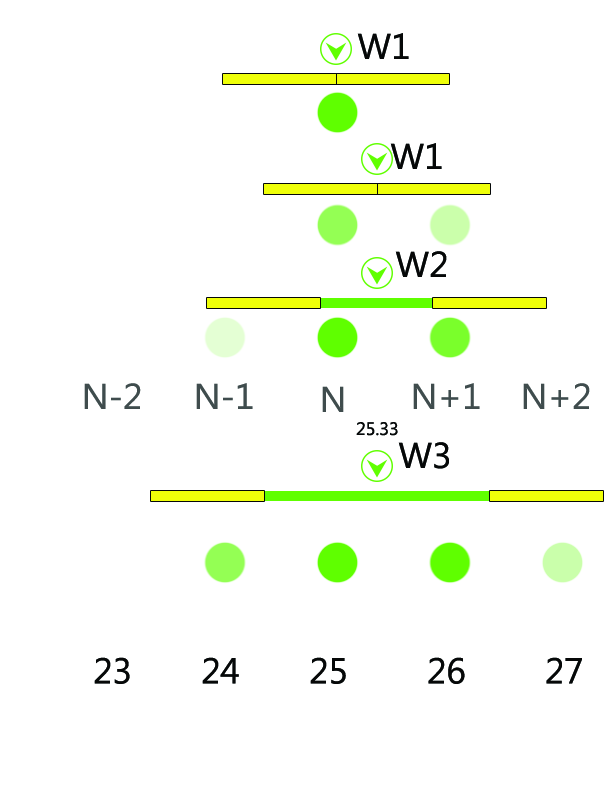
<style>
.page{position:relative;width:612px;height:792px;background:#ffffff}
.page>*{position:absolute;margin:0}
.t1{font:36px "MicrosoftNewTaiLue";color:#060808}
.t2{font:36px "MicrosoftNewTaiLue";color:#3f4c4d}
.t3{font:18px "MicrosoftNewTaiLue";color:#060808}
</style>
<div class="page">
<p class="t1" style="left:357px;top:33px;width:52px;height:26px">W1</p>
<p class="t1" style="left:390px;top:143px;width:52px;height:26px">W1</p>
<p class="t1" style="left:395px;top:251px;width:52px;height:26px">W2</p>
<p class="t2" style="left:84px;top:383px;width:57px;height:26px">N-2</p>
<p class="t2" style="left:196px;top:383px;width:57px;height:26px">N-1</p>
<p class="t2" style="left:322px;top:386px;width:22px;height:26px">N</p>
<p class="t2" style="left:413px;top:383px;width:67px;height:26px">N+1</p>
<p class="t2" style="left:523px;top:383px;width:67px;height:26px">N+2</p>
<p class="t3" style="left:356px;top:422px;width:42px;height:14px">25.33</p>
<p class="t1" style="left:398px;top:442px;width:51px;height:27px">W3</p>
<p class="t1" style="left:94px;top:657px;width:488px;height:27px">23  24  25   26    27</p>
</div>
